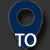
<style>
.page{position:relative;width:50px;height:50px;background:#333333}
.page>*{position:absolute;margin:0}
.t1{font:18px "MyriadPro-Regular";color:#ffffff;text-transform:uppercase;font-weight:bold}
</style>
<div class="page">
<p class="t1" style="left:15px;top:33px;width:22px;height:14px">to</p>
</div>
